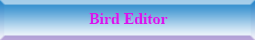
<style>
.page{position:relative;width:255px;height:40px}
.page>*{position:absolute;margin:0}
.t1{font:15.8px "TimesNewRomanPS-BoldMT";color:#d815ed}
</style>
<div class="page">
<p class="t1" style="left:89px;top:13px;width:79px;height:11px">Bird Editor</p>
</div>
